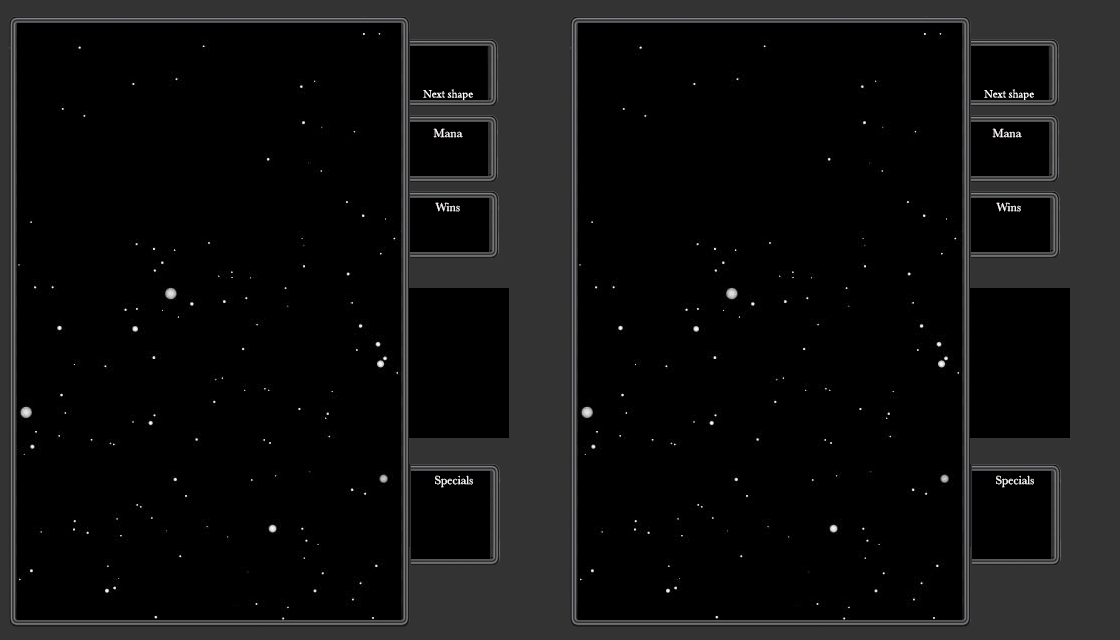
<style>
.page{position:relative;width:1120px;height:640px;background:#000000}
.page>*{position:absolute;margin:0}
.t1{font:12px "Baskerville";color:#fdf9f9}
</style>
<div class="page">
<p class="t1" style="left:433px;top:128px;width:30px;height:10px">Mana</p>
<p class="t1" style="left:992px;top:128px;width:30px;height:10px">Mana</p>
<p class="t1" style="left:435px;top:202px;width:25px;height:10px">Wins</p>
<p class="t1" style="left:996px;top:202px;width:25px;height:10px">Wins</p>
<p class="t1" style="left:435px;top:475px;width:38px;height:13px">Specials</p>
<p class="t1" style="left:996px;top:475px;width:38px;height:13px">Specials</p>
</div>
